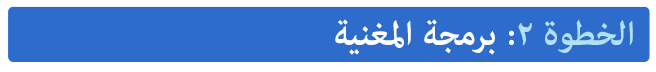
<style>
.page{position:relative;width:656px;height:72px;background:#2d6ccb}
.page>*{position:absolute;margin:0}
.t1{font:48px "AdobeArabic-Bold";color:#ffffff}
.t2{font:48px "AdobeArabic-Bold";color:#b0e1f9}
</style>
<div class="page">
<p class="t1" style="left:335px;top:19px;width:298px;height:36px"><span class="t2">الخطوة ٢</span>: برمجة المغنية</p>
</div>
